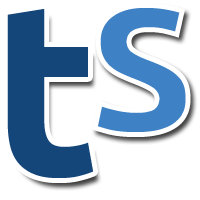
<style>
.page{position:relative;width:200px;height:200px;background:#ffffff}
.page>*{position:absolute;margin:0}
.t1{font:241.5px "Ubuntu-Bold";color:#3f81c5}
.t2{font:244.1px "Ubuntu-Bold";color:#14467a}
</style>
<div class="page">
<p class="t1" style="left:92px;top:3px;width:99px;height:134px">s</p>
<p class="t2" style="left:7px;top:9px;width:87px;height:169px">t</p>
</div>
